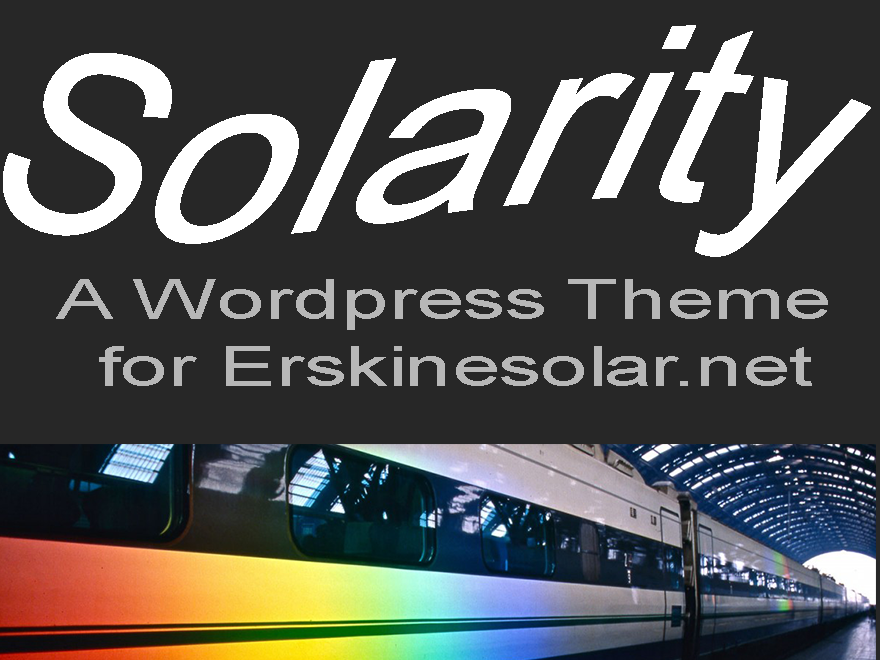
<style>
.page{position:relative;width:880px;height:660px;background:#272727}
.page>*{position:absolute;margin:0}
.t1{font:263.9px "ArialMT";color:#ffffff;scale:0.88 1}
.t2{font:55.7px "ArialMT";color:#b7b7b7;scale:1.52 1}
</style>
<div class="page">
<p class="t1" style="left:3px;top:25px;width:868px;height:232px;rotate:26deg">Solarity</p>
<p class="t2" style="left:56px;top:279px;width:772px;height:107px;text-align:center">A Wordpress Theme <br>for Erskinesolar.net</p>
</div>
